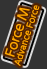
<style>
.page{position:relative;width:47px;height:69px;background:#333333}
.page>*{position:absolute;margin:0}
.t1{font:8px/12px "UDShinGoPro-Light";color:#ffa700;font-weight:bold}
.t2{font:12px/12px "UDShinGoPro-Light";color:#ffa700;font-weight:bold}
</style>
<div class="page">
<p class="t1" style="left:4px;top:5px;width:36px;height:61px;text-align:center;rotate:-72deg"><span class="t2">Force M<br></span>Advance Force</p>
</div>
